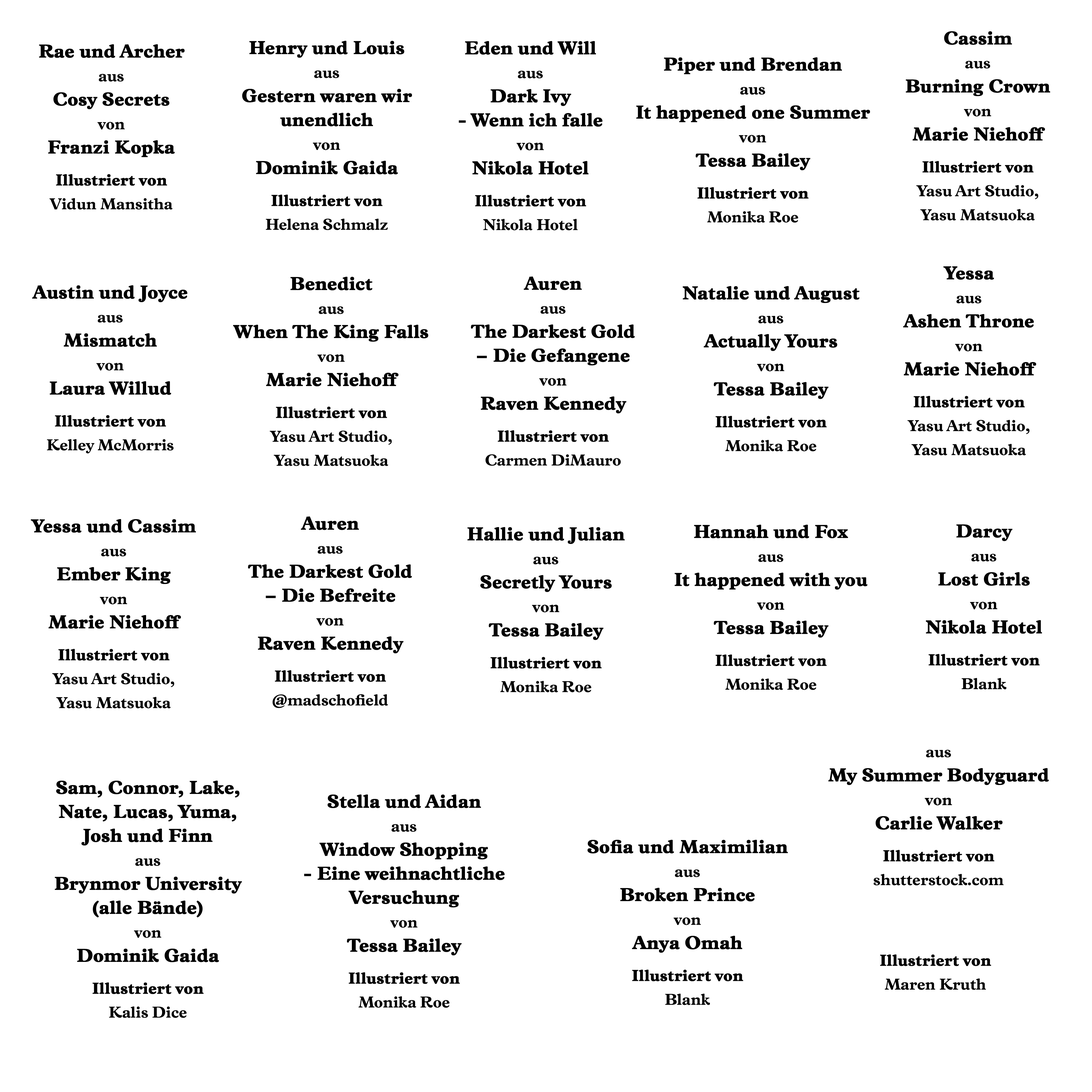
<style>
.page{position:relative;width:1092px;height:1092px;background:#ffffff}
.page>*{position:absolute;margin:0}
.t1{font:18.7px/24px "Vulpa-Bold";color:#000000;font-weight:bold}
.t2{font:16px/24px "Vulpa-Bold";color:#000000}
.t3{font:16px/32px "Vulpa-Bold";color:#000000;font-weight:bold}
</style>
<div class="page">
<p class="t1" style="left:242px;top:41px;width:170px;height:189px;text-align:center">Henry und Louis<br><span class="t2">aus<br></span>Gestern waren wir<br>unendlich<br><span class="t2">von<br></span>Dominik Gaida<br><span class="t3">Illustriert von<br></span><span class="t2">Helena Schmalz</span></p>
<p class="t1" style="left:459px;top:41px;width:144px;height:189px;text-align:center">Eden und Will<br><span class="t2">aus<br></span>Dark Ivy<br>- Wenn ich falle<br><span class="t2">von<br></span>Nikola Hotel<br><span class="t3">Illustriert von<br></span><span class="t2">Nikola Hotel</span></p>
<p class="t2" style="left:906px;top:31px;width:144px;height:189px;text-align:center"><span class="t1">Cassim<br></span>aus<br><span class="t1">Burning Crown<br></span>von<br><span class="t1">Marie Niehoff<br></span><span class="t3">Illustriert von<br></span>Yasu Art Studio,<br>Yasu Matsuoka</p>
<p class="t3" style="left:39px;top:44px;width:146px;height:166px;text-align:center"><span class="t1">Rae und Archer<br></span><span class="t2">aus<br></span><span class="t1">Cosy Secrets<br></span><span class="t2">von<br></span><span class="t1">Franzi Kopka<br></span>Illustriert von<br><span class="t2">Vidun Mansitha</span></p>
<p class="t1" style="left:636px;top:57px;width:234px;height:166px;text-align:center">Piper und Brendan<br><span class="t2">aus<br></span>It happened one Summer<br><span class="t2">von<br></span>Tessa Bailey<br><span class="t3">Illustriert von<br></span><span class="t2">Monika Roe</span></p>
<p class="t2" style="left:903px;top:266px;width:133px;height:189px;text-align:center"><span class="t1">Yessa<br></span>aus<br><span class="t1">Ashen Throne<br></span>von<br><span class="t1">Marie Niehoff<br></span><span class="t3">Illustriert von<br></span>Yasu Art Studio,<br>Yasu Matsuoka</p>
<p class="t2" style="left:233px;top:277px;width:195px;height:189px;text-align:center"><span class="t1">Benedict<br></span>aus<br><span class="t1">When The King Falls<br></span>von<br><span class="t1">Marie Niehoff<br></span><span class="t3">Illustriert von<br></span>Yasu Art Studio,<br>Yasu Matsuoka</p>
<p class="t1" style="left:471px;top:276px;width:164px;height:190px;text-align:center">Auren<br><span class="t2">aus<br></span>The Darkest Gold<br>– Die Gefangene<br><span class="t2">von<br></span>Raven Kennedy<br><span class="t3">Illustriert von<br></span><span class="t2">Carmen DiMauro</span></p>
<p class="t1" style="left:32px;top:285px;width:155px;height:168px;text-align:center">Austin und Joyce<br><span class="t2">aus<br></span>Mismatch<br><span class="t2">von<br></span>Laura Willud<br><span class="t3">Illustriert von<br></span><span class="t2">Kelley McMorris</span></p>
<p class="t1" style="left:683px;top:286px;width:177px;height:165px;text-align:center">Natalie und August<br><span class="t2">aus<br></span>Actually Yours<br><span class="t2">von<br></span>Tessa Bailey<br><span class="t3">Illustriert von<br></span><span class="t2">Monika Roe</span></p>
<p class="t2" style="left:31px;top:519px;width:165px;height:189px;text-align:center"><span class="t1">Yessa und Cassim<br></span>aus<br><span class="t1">Ember King<br></span>von<br><span class="t1">Marie Niehoff<br></span><span class="t3">Illustriert von<br></span>Yasu Art Studio,<br>Yasu Matsuoka</p>
<p class="t1" style="left:248px;top:516px;width:164px;height:192px;text-align:center">Auren<br><span class="t2">aus<br></span>The Darkest Gold<br>– Die Befreite<br><span class="t2">von<br></span>Raven Kennedy<br><span class="t3">Illustriert von<br></span><span class="t2">@madschofield</span></p>
<p class="t1" style="left:467px;top:527px;width:158px;height:165px;text-align:center">Hallie und Julian<br><span class="t2">aus<br></span>Secretly Yours<br><span class="t2">von<br></span>Tessa Bailey<br><span class="t3">Illustriert von<br></span><span class="t2">Monika Roe</span></p>
<p class="t1" style="left:674px;top:525px;width:194px;height:165px;text-align:center">Hannah und Fox<br><span class="t2">aus<br></span>It happened with you<br><span class="t2">von<br></span>Tessa Bailey<br><span class="t3">Illustriert von<br></span><span class="t2">Monika Roe</span></p>
<p class="t3" style="left:926px;top:524px;width:116px;height:165px;text-align:center"><span class="t1">Darcy<br></span><span class="t2">aus<br></span><span class="t1">Lost Girls<br></span><span class="t2">von<br></span><span class="t1">Nikola Hotel<br></span>Illustriert von<br><span class="t2">Blank</span></p>
<p class="t1" style="left:828px;top:750px;width:221px;height:135px;text-align:center"><span class="t2">aus<br></span>My Summer Bodyguard<br><span class="t2">von<br></span>Carlie Walker<br><span class="t3">Illustriert von<br></span><span class="t2">shutterstock.com</span></p>
<p class="t1" style="left:55px;top:781px;width:187px;height:237px;text-align:center">Sam, Connor, Lake,<br>Nate, Lucas, Yuma,<br>Josh und Finn<br><span class="t2">aus<br></span>Brynmor University<br>(alle Bände)<br><span class="t2">von<br></span>Dominik Gaida<br><span class="t3">Illustriert von<br></span><span class="t2">Kalis Dice</span></p>
<p class="t1" style="left:304px;top:794px;width:201px;height:214px;text-align:center">Stella und Aidan<br><span class="t2">aus<br></span>Window Shopping<br>- Eine weihnachtliche<br>Versuchung<br><span class="t2">von<br></span>Tessa Bailey<br><span class="t3">Illustriert von<br></span><span class="t2">Monika Roe</span></p>
<p class="t1" style="left:587px;top:840px;width:201px;height:165px;text-align:center">Sofia und Maximilian<br><span class="t2">aus<br></span>Broken Prince<br><span class="t2">von<br></span>Anya Omah<br><span class="t3">Illustriert von<br></span><span class="t2">Blank</span></p>
<p class="t3" style="left:880px;top:954px;width:111px;height:36px;text-align:center">Illustriert von<br><span class="t2">Maren Kruth</span></p>
</div>
